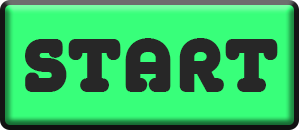
<style>
.page{position:relative;width:300px;height:130px;background:#38ff7a}
.page>*{position:absolute;margin:0}
.t1{font:73.3px "MelodBold";letter-spacing:0.055em;color:#272727}
</style>
<div class="page">
<p class="t1" style="left:25px;top:38px;width:253px;height:54px">START</p>
</div>
